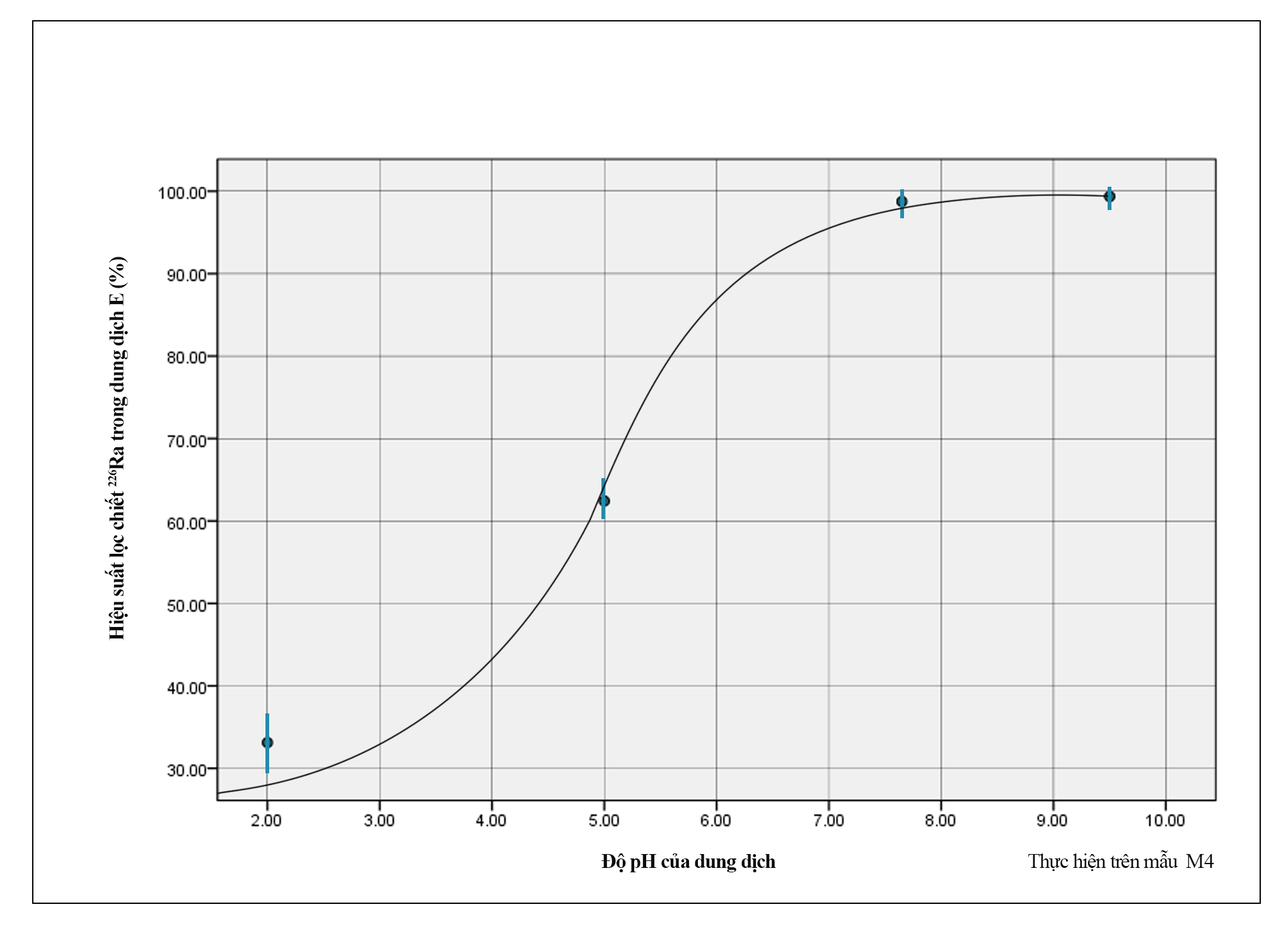
<style>
.page{position:relative;width:1281px;height:931px;background:#f0f0f0}
.page>*{position:absolute;margin:0}
.t1{font:21px "TimesNewRomanPS-BoldMT";letter-spacing:-0.04em;color:#0a0a0a}
.t2{font:21px "TimesNewRomanPSMT";letter-spacing:-0.04em;color:#0a0a0a}
</style>
<div class="page">
<p class="t1" style="left:105px;top:257px;width:23px;height:384px;rotate:-90deg">Hiệu suất lọc chiết 226Ra trong dung dịch E (%)</p>
<p class="t1" style="left:602px;top:853px;width:174px;height:19px">Độ pH của dung dịch</p>
<p class="t2" style="left:1028px;top:850px;width:186px;height:21px">Thực hiện trên mẫu  M4</p>
</div>
